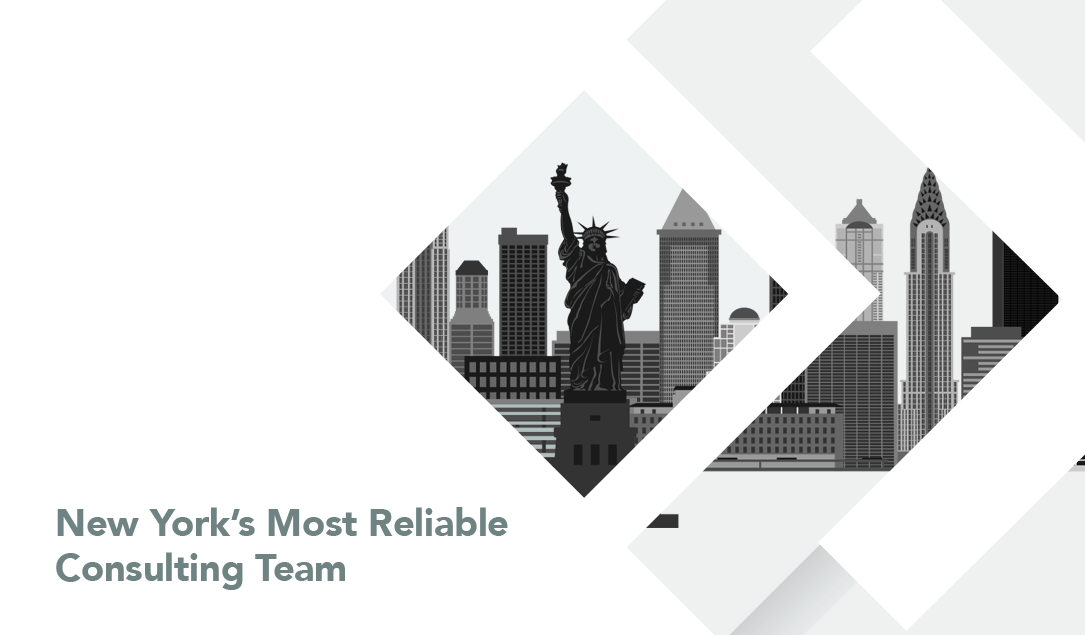
<style>
.page{position:relative;width:1085px;height:635px;background:#ffffff}
.page>*{position:absolute;margin:0}
.t1{font:37.5px "Avenir-Black";color:#6f8383}
</style>
<div class="page">
<p class="t1" style="left:56px;top:507px;width:452px;height:83px">New York’s Most Reliable <br>Consulting Team</p>
</div>
